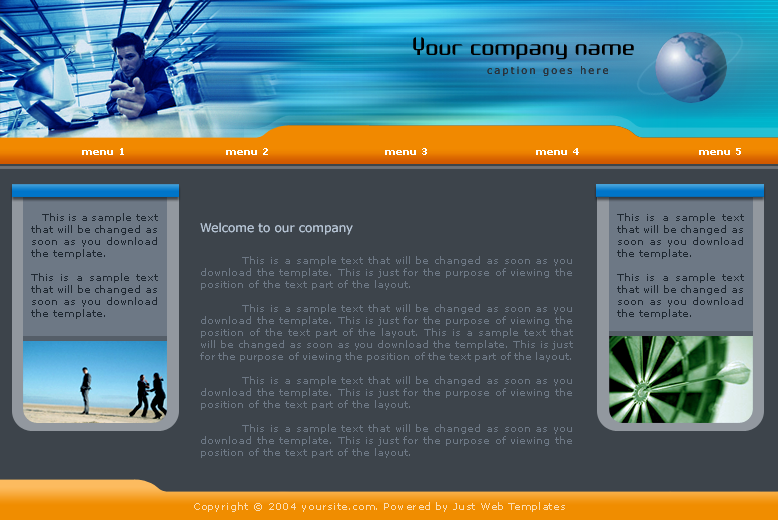
<style>
.page{position:relative;width:778px;height:520px;background:#3d444b}
.page>*{position:absolute;margin:0}
.t1{font:22px "Arbeka";color:#000000}
.t2{font:10px "Verdana";letter-spacing:0.2em;color:#2a323a}
.t3{font:10px "Verdana-Bold";color:#ffffff}
.t4{font:10px "Verdana";color:#1f2831}
.t5{font:12px "Verdana";color:#b4c2d2}
.t6{font:10px "Verdana";color:#6d7885}
.t7{font:10px "Verdana";letter-spacing:0.05em;color:#fbddb3}
</style>
<div class="page">
<p class="t1" style="left:413px;top:37px;width:221px;height:23px">Your company name</p>
<p class="t2" style="left:487px;top:66px;width:121px;height:10px">caption goes here</p>
<p class="t3" style="left:82px;top:148px;width:42px;height:7px">menu 1</p>
<p class="t3" style="left:226px;top:148px;width:42px;height:7px">menu 2</p>
<p class="t3" style="left:385px;top:148px;width:42px;height:7px">menu 3</p>
<p class="t3" style="left:536px;top:148px;width:43px;height:7px">menu 4</p>
<p class="t3" style="left:699px;top:148px;width:42px;height:7px">menu 5</p>
<p class="t4" style="left:31px;top:213px;width:127px;height:106px;text-align:justify">This is a sample text that will be changed as soon as you download the template. <br><br>This is a sample text that will be changed as soon as you download the template.</p>
<p class="t5" style="left:200px;top:222px;width:153px;height:13px">Welcome to our company</p>
<p class="t4" style="left:617px;top:213px;width:127px;height:106px;text-align:justify">This is a sample text that will be changed as soon as you download the template. <br><br>This is a sample text that will be changed as soon as you download the template.</p>
<p class="t6" style="left:200px;top:256px;width:373px;height:202px;text-align:justify">This is a sample text that will be changed as soon as you download the template. This is just for the purpose of viewing the position of the text part of the layout.<br><br>         This is a sample text that will be changed as soon as you download the template. This is just for the purpose of viewing the position of the text part of the layout. This is a sample text that will be changed as soon as you download the template. This is just for the purpose of viewing the position of the text part of the layout.<br><br>         This is a sample text that will be changed as soon as you download the template. This is just for the purpose of viewing the position of the text part of the layout.<br><br>         This is a sample text that will be changed as soon as you download the template. This is just for the purpose of viewing the position of the text part of the layout.</p>
<p class="t7" style="left:194px;top:502px;width:371px;height:10px">Copyright © 2004 yoursite.com. Powered by Just Web Templates</p>
</div>
